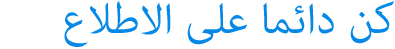
<style>
.page{position:relative;width:395px;height:49px;background:#ffffff}
.page>*{position:absolute;margin:0}
.t1{font:60.1px "AdobeArabic-Regular";color:#0689e6;text-transform:uppercase}
</style>
<div class="page">
<p class="t1" style="left:64px;top:1px;width:331px;height:46px">ﻉﻼﻃﻻﺍ ﻰﻠﻋ ﺎﻤﺋﺍﺩ ﻦﻛ</p>
</div>
